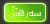
<style>
.page{position:relative;width:50px;height:24px}
.page>*{position:absolute;margin:0}
.t1{font:8.5px "DroidArabicKufi";color:#ffffff}
</style>
<div class="page">
<p class="t1" style="left:9px;top:6px;width:32px;height:12px">سەر هێڵ</p>
</div>
